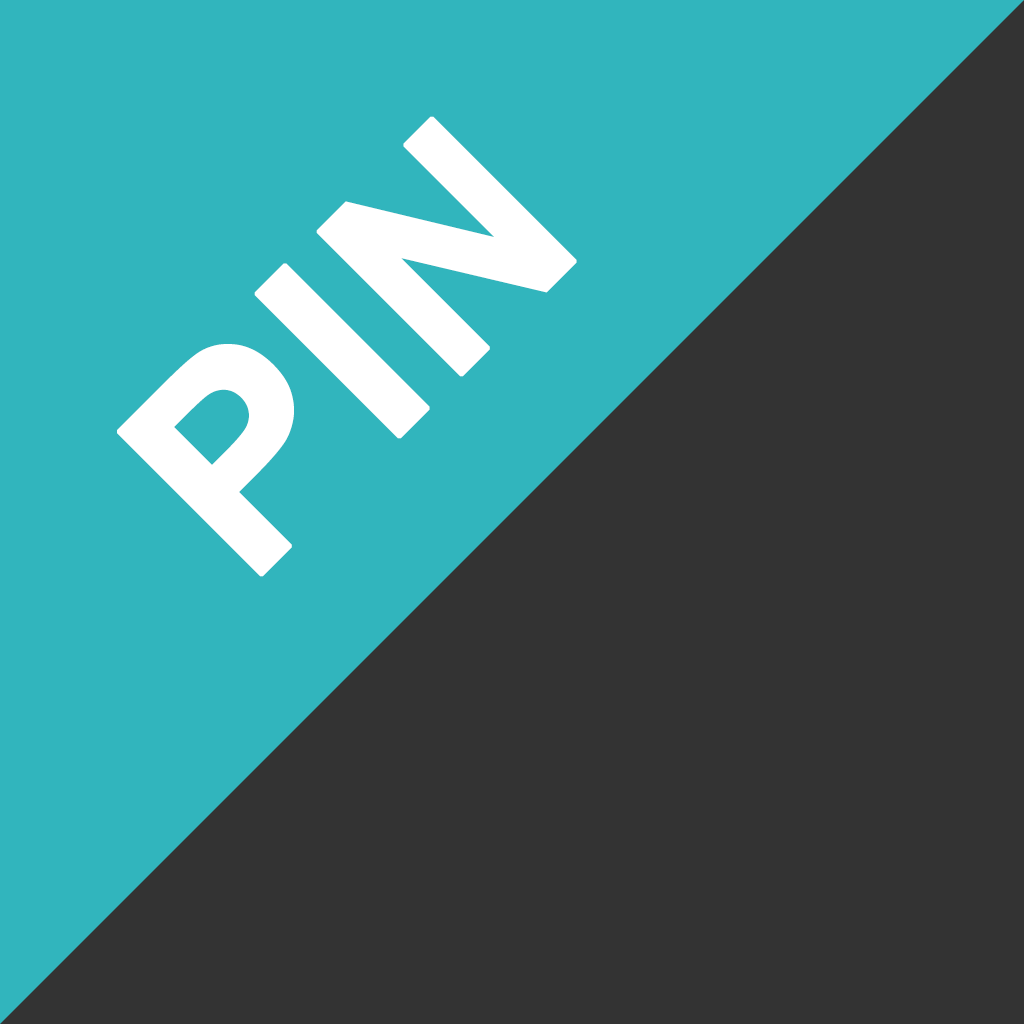
<style>
.page{position:relative;width:1024px;height:1024px;background:#333333}
.page>*{position:absolute;margin:0}
.t1{font:282.7px "Arial-BoldMT";color:#ffffff;font-weight:bold}
</style>
<div class="page">
<p class="t1" style="left:117px;top:116px;width:460px;height:461px;rotate:-45deg">PIN</p>
</div>
